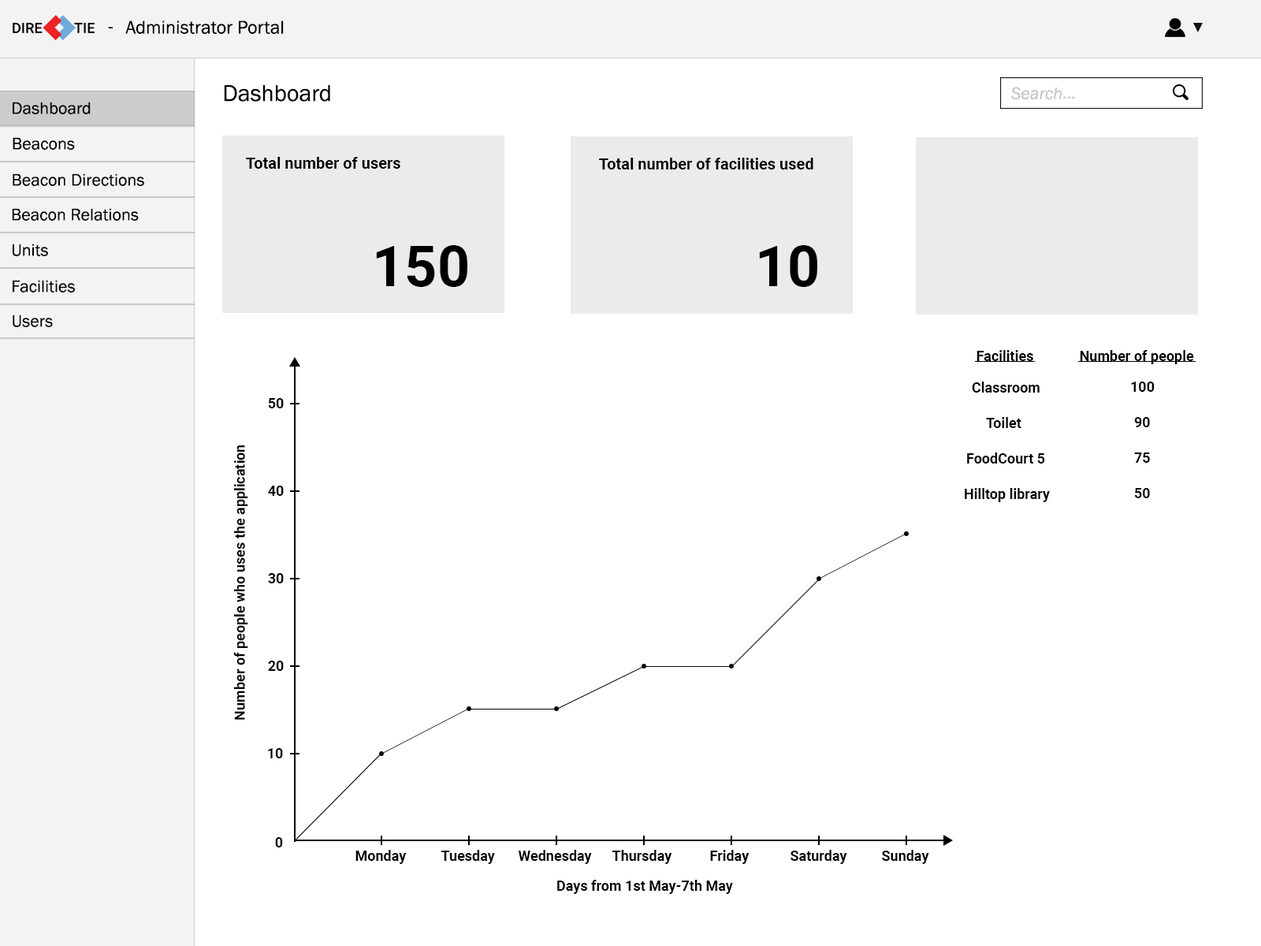
<style>
.page{position:relative;width:1261px;height:946px;background:#ffffff}
.page>*{position:absolute;margin:0}
.t1{font:18.9px "FranklinGothic-Book";color:#000000}
.t2{font:23.6px "FranklinGothic-Book";color:#000000}
.t3{font:17.3px "FranklinGothic-Book";color:#000000}
.t4{font:15.8px "Roboto-Bold";color:#000000}
.t5{font:56.7px "Roboto-Bold";color:#000000}
.t6{font:14.2px "Roboto-Bold";color:#000000}
.t7{font:14.2px "Roboto-Bold";color:#010101}
</style>
<div class="page">
<p class="t1" style="left:108px;top:27px;width:5px;height:1px">-</p>
<p class="t1" style="left:125px;top:20px;width:159px;height:14px">Administrator Portal</p>
<p class="t2" style="left:224px;top:85px;width:106px;height:17px">Dashboard</p>
<p class="t3" style="left:13px;top:102px;width:78px;height:12px">Dashboard</p>
<p class="t3" style="left:13px;top:137px;width:62px;height:13px">Beacons</p>
<p class="t4" style="left:246px;top:157px;width:154px;height:12px">Total number of users</p>
<p class="t4" style="left:599px;top:158px;width:214px;height:11px">Total number of facilities used</p>
<p class="t3" style="left:13px;top:173px;width:131px;height:13px">Beacon Directions</p>
<p class="t3" style="left:12px;top:208px;width:127px;height:13px">Beacon Relations</p>
<p class="t3" style="left:13px;top:244px;width:35px;height:12px">Units</p>
<p class="t5" style="left:376px;top:245px;width:91px;height:42px">150</p>
<p class="t5" style="left:759px;top:245px;width:58px;height:42px">10</p>
<p class="t3" style="left:13px;top:280px;width:62px;height:12px">Facilities</p>
<p class="t3" style="left:13px;top:314px;width:40px;height:13px">Users</p>
<p class="t6" style="left:976px;top:350px;width:57px;height:11px">Facilities</p>
<p class="t6" style="left:1080px;top:350px;width:114px;height:14px">Number of people</p>
<p class="t6" style="left:972px;top:381px;width:67px;height:11px">Classroom</p>
<p class="t6" style="left:1131px;top:381px;width:24px;height:11px">100</p>
<p class="t7" style="left:268px;top:398px;width:16px;height:10px">50</p>
<p class="t6" style="left:986px;top:417px;width:35px;height:11px">Toilet</p>
<p class="t6" style="left:1134px;top:417px;width:16px;height:10px">90</p>
<p class="t6" style="left:233px;top:445px;width:15px;height:275px;rotate:-90deg">Number of people who uses the application</p>
<p class="t6" style="left:967px;top:452px;width:78px;height:11px">FoodCourt 5</p>
<p class="t6" style="left:1134px;top:452px;width:16px;height:11px">75</p>
<p class="t7" style="left:268px;top:485px;width:16px;height:11px">40</p>
<p class="t6" style="left:965px;top:488px;width:85px;height:14px">Hilltop library</p>
<p class="t6" style="left:1134px;top:488px;width:16px;height:10px">50</p>
<p class="t7" style="left:268px;top:573px;width:16px;height:10px">30</p>
<p class="t7" style="left:268px;top:660px;width:16px;height:11px">20</p>
<p class="t7" style="left:268px;top:748px;width:15px;height:10px">10</p>
<p class="t7" style="left:275px;top:837px;width:8px;height:10px">0</p>
<p class="t6" style="left:355px;top:850px;width:52px;height:14px">Monday</p>
<p class="t6" style="left:441px;top:850px;width:54px;height:14px">Tuesday</p>
<p class="t6" style="left:518px;top:850px;width:74px;height:14px">Wednesday</p>
<p class="t6" style="left:612px;top:850px;width:60px;height:14px">Thursday</p>
<p class="t6" style="left:710px;top:850px;width:39px;height:14px">Friday</p>
<p class="t6" style="left:790px;top:850px;width:57px;height:14px">Saturday</p>
<p class="t6" style="left:882px;top:850px;width:47px;height:14px">Sunday</p>
<p class="t6" style="left:557px;top:879px;width:176px;height:15px">Days from 1st May-7th May</p>
</div>
